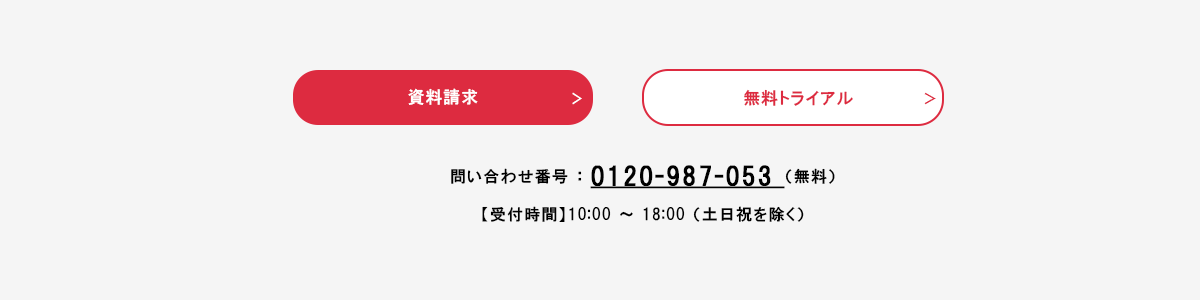
<style>
.page{position:relative;width:1200px;height:300px;background:#f5f5f5}
.page>*{position:absolute;margin:0}
.t1{font:17px "HGPGothicE";letter-spacing:0.05em;color:#ffffff}
.t2{font:17px "HGPGothicE";letter-spacing:0.05em;color:#dd2b40}
.t3{font:14px "HGPGothicE";letter-spacing:0.05em;color:#ffffff;scale:0.82 1}
.t4{font:14px "HGPGothicE";letter-spacing:0.05em;color:#dd2b40}
.t5{font:25px "HGPGothicE";letter-spacing:0.075em;color:#000000;font-weight:bold;text-decoration:underline}
.t6{font:16px "HGPGothicE";letter-spacing:0.075em;color:#000000}
</style>
<div class="page">
<p class="t1" style="left:408px;top:88px;width:70px;height:17px">資料請求</p>
<p class="t2" style="left:744px;top:89px;width:109px;height:17px">無料トライアル</p>
<p class="t3" style="left:572px;top:92px;width:10px;height:13px">＞</p>
<p class="t4" style="left:924px;top:92px;width:12px;height:13px">＞</p>
<p class="t5" style="left:451px;top:165px;width:384px;height:24px"><span class="t6">問い合わせ番号 ： </span>0120-987-053 <span class="t6">（無料）</span></p>
<p class="t6" style="left:482px;top:206px;width:322px;height:16px">【受付時間】10:00 ～ 18:00 （土日祝を除く）</p>
</div>
